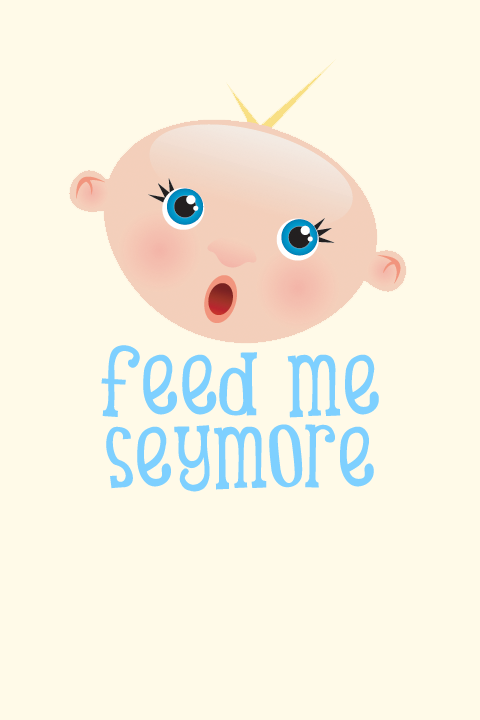
<style>
.page{position:relative;width:480px;height:720px;background:#fffae8}
.page>*{position:absolute;margin:0}
.t1{font:110px/72px "SCTinasBabyShower";color:#7ed0ff;text-transform:uppercase}
</style>
<div class="page">
<p class="t1" style="left:101px;top:345px;width:278px;height:147px;text-align:center">feed me<br>seymore</p>
</div>
